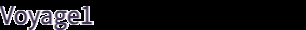
<style>
.page{position:relative;width:306px;height:30px;background:#000000}
.page>*{position:absolute;margin:0}
.t1{font:24px "WebPSD-18463539-0-Regular";color:#3f3254;font-weight:bold}
</style>
<div class="page">
<p class="t1" style="left:0px;top:0px;width:306px;height:30px">Voyage1</p>
</div>
